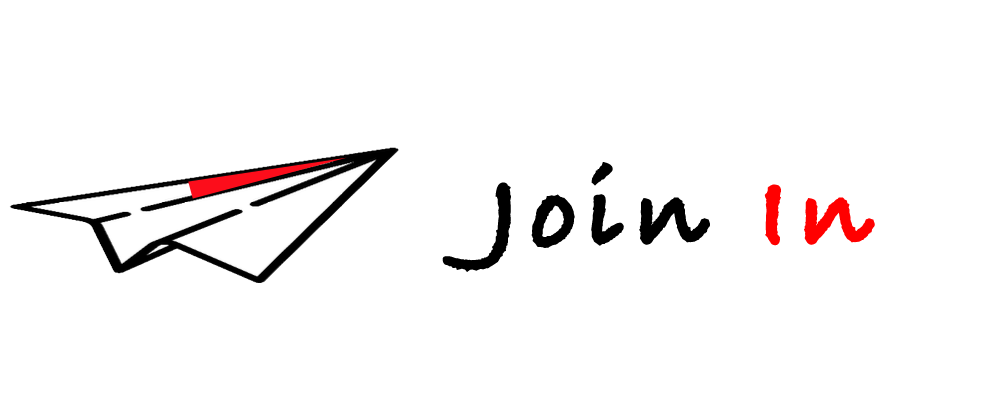
<style>
.page{position:relative;width:1000px;height:400px;background:#ffffff}
.page>*{position:absolute;margin:0}
.t1{font:108px "BradleyHandITCTT-Bold";letter-spacing:0.08em;color:#000000;font-weight:bold}
.t2{font:108px "BradleyHandITCTT-Bold";letter-spacing:0.08em;color:#ff0000;font-weight:bold}
</style>
<div class="page">
<p class="t1" style="left:442px;top:162px;width:433px;height:110px">Join <span class="t2">In</span></p>
</div>
